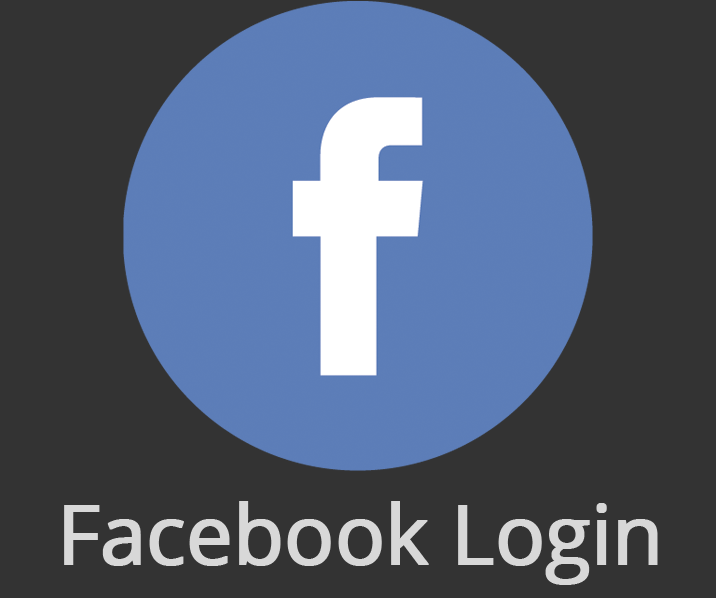
<style>
.page{position:relative;width:716px;height:598px;background:#333333}
.page>*{position:absolute;margin:0}
.t1{font:83.3px "OpenSans";letter-spacing:-0.025em;color:#d8d8d8;font-weight:bold}
</style>
<div class="page">
<p class="t1" style="left:64px;top:501px;width:594px;height:84px">Facebook Login</p>
</div>
